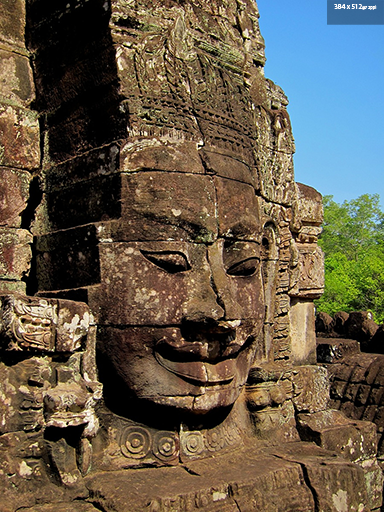
<style>
.page{position:relative;width:384px;height:512px}
.page>*{position:absolute;margin:0}
.t1{font:7px "MyriadPro-Regular";color:#ffffff}
.t2{font:4.5px "MyriadPro-Regular";color:#ffffff}
</style>
<div class="page">
<p class="t1" style="left:334px;top:4px;width:43px;height:6px">384 x 512<span class="t2">@72ppi</span></p>
</div>
